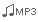
<style>
.page{position:relative;width:38px;height:22px;background:#ffffff}
.page>*{position:absolute;margin:0}
.t1{font:10px "Arial-BoldMT";color:#666666}
</style>
<div class="page">
<p class="t1" style="left:16px;top:8px;width:20px;height:7px">MP3</p>
</div>
